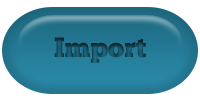
<style>
.page{position:relative;width:200px;height:100px;background:#ffffff}
.page>*{position:absolute;margin:0}
.t1{font:28.1px "ChunkFiveEx"}
</style>
<div class="page">
<p class="t1" style="left:54px;top:37px;width:92px;height:26px">Import</p>
</div>
